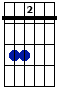
<style>
.page{position:relative;width:60px;height:89px;background:#ffffff}
.page>*{position:absolute;margin:0}
.t1{font:10px "Tahoma-Bold";letter-spacing:0.04em;color:#000000}
</style>
<div class="page">
<p class="t1" style="left:27px;top:6px;width:6px;height:7px">2</p>
</div>
